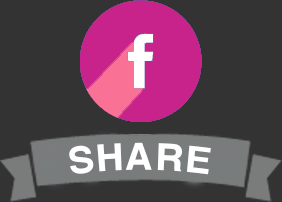
<style>
.page{position:relative;width:282px;height:202px;background:#333333}
.page>*{position:absolute;margin:0}
.t1{font:36.8px "Helvetica-Bold";letter-spacing:0.04em;color:#ffffff}
</style>
<div class="page">
<p class="t1" style="left:69px;top:142px;width:142px;height:33px">SHARE</p>
</div>
